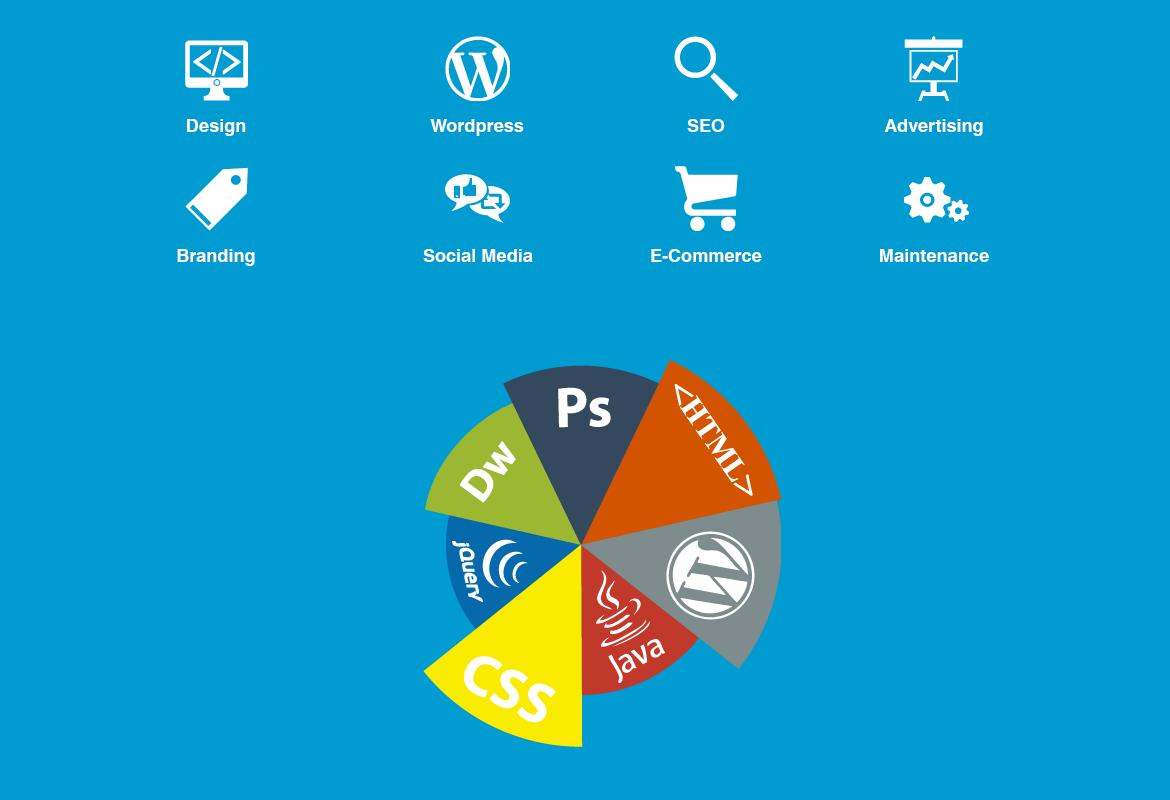
<style>
.page{position:relative;width:1170px;height:800px;background:#009bd0}
.page>*{position:absolute;margin:0}
.t1{font:18px "HelveticaWorld-Bold";color:#ffffff}
</style>
<div class="page">
<p class="t1" style="left:187px;top:119px;width:59px;height:17px">Design</p>
<p class="t1" style="left:430px;top:119px;width:94px;height:17px">Wordpress</p>
<p class="t1" style="left:687px;top:119px;width:38px;height:13px">SEO</p>
<p class="t1" style="left:884px;top:119px;width:99px;height:17px">Advertising</p>
<p class="t1" style="left:177px;top:249px;width:78px;height:17px">Branding</p>
<p class="t1" style="left:423px;top:249px;width:110px;height:13px">Social Media</p>
<p class="t1" style="left:651px;top:249px;width:111px;height:13px">E-Commerce</p>
<p class="t1" style="left:880px;top:249px;width:109px;height:13px">Maintenance</p>
</div>
